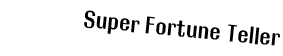
<style>
.page{position:relative;width:283px;height:56px;background:#ffffff}
.page>*{position:absolute;margin:0}
.t1{font:24px "RolloutPlain";color:#000000}
</style>
<div class="page">
<p class="t1" style="left:84px;top:10px;width:196px;height:36px;rotate:6deg">Super Fortune Teller</p>
</div>
